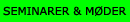
<style>
.page{position:relative;width:130px;height:22px;background:#00ff00}
.page>*{position:absolute;margin:0}
.t1{font:11px "Verdana";color:#000000}
</style>
<div class="page">
<p class="t1" style="left:3px;top:6px;width:124px;height:10px">SEMINARER &amp; MØDER</p>
</div>
